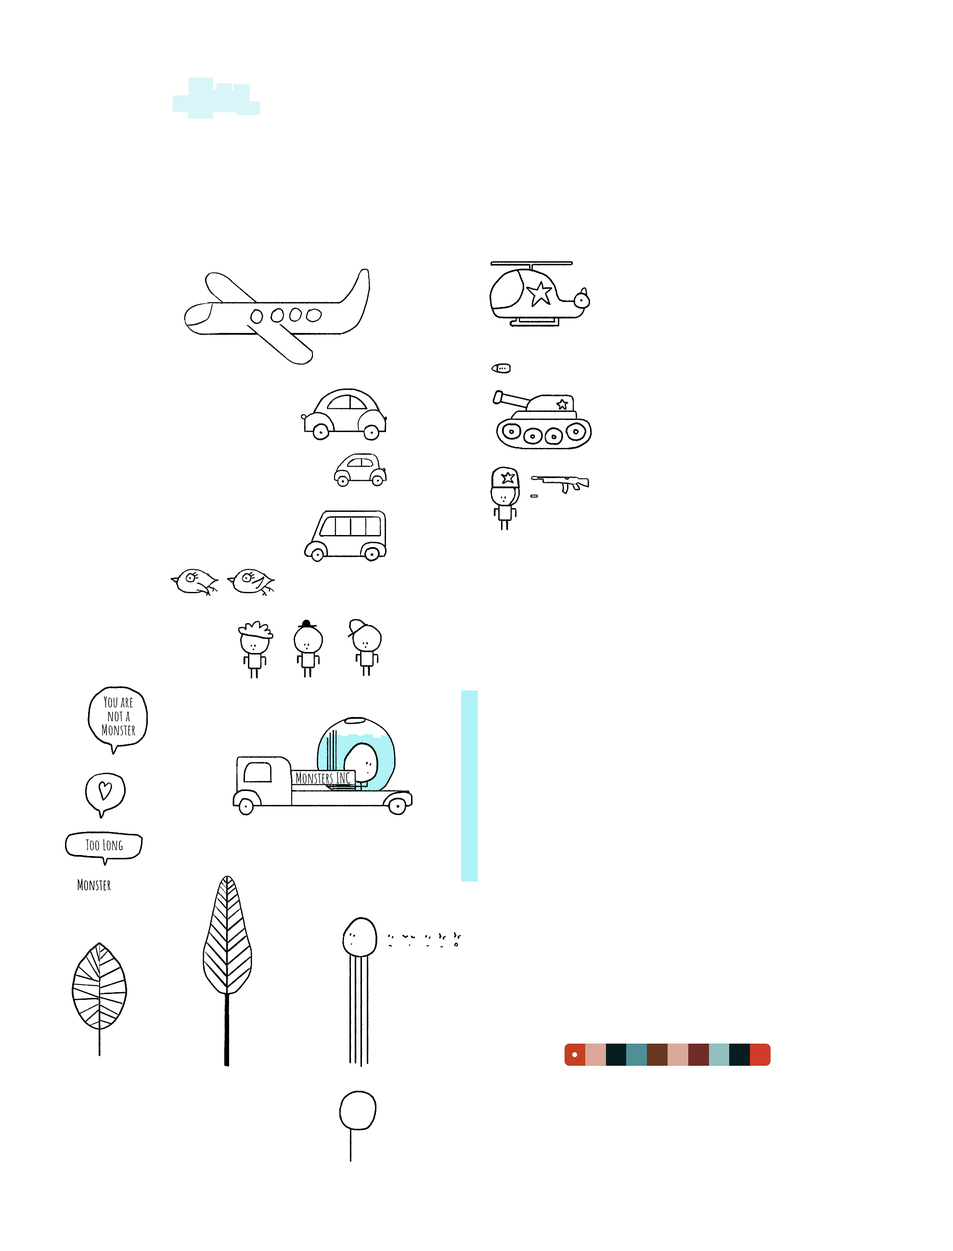
<style>
.page{position:relative;width:953px;height:1251px;background:#ffffff}
.page>*{position:absolute;margin:0}
.t1{font:14.4px/14px "AmaticSC-Bold";color:#000000}
.t2{font:14.4px "AmaticSC-Bold";color:#000000}
</style>
<div class="page">
<p class="t1" style="left:102px;top:696px;width:33px;height:40px;text-align:center">You are<br>not a<br>Monster</p>
<p class="t2" style="left:296px;top:772px;width:54px;height:12px">Monsters INC</p>
<p class="t2" style="left:86px;top:839px;width:37px;height:12px">Too Long</p>
<p class="t2" style="left:77px;top:879px;width:34px;height:12px">Monster</p>
</div>
